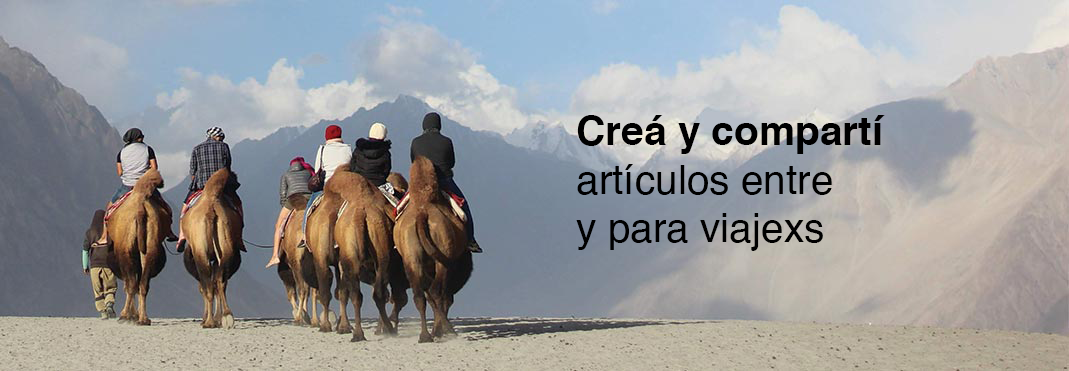
<style>
.page{position:relative;width:1069px;height:371px}
.page>*{position:absolute;margin:0}
.t1{font:40.6px "Helvetica";color:#000000}
.t2{font:40.6px "Helvetica-Bold";color:#000000}
</style>
<div class="page">
<p class="t1" style="left:576px;top:115px;width:309px;height:136px"><span class="t2">Creá y compartí<br></span>artículos entre<br>y para viajexs</p>
</div>
